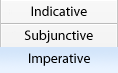
<style>
.page{position:relative;width:118px;height:73px}
.page>*{position:absolute;margin:0}
.t1{font:13.9px "MyriadPro-Regular";color:#000000}
</style>
<div class="page">
<p class="t1" style="left:31px;top:6px;width:56px;height:10px">Indicative</p>
<p class="t1" style="left:24px;top:30px;width:69px;height:13px">Subjunctive</p>
</div>
